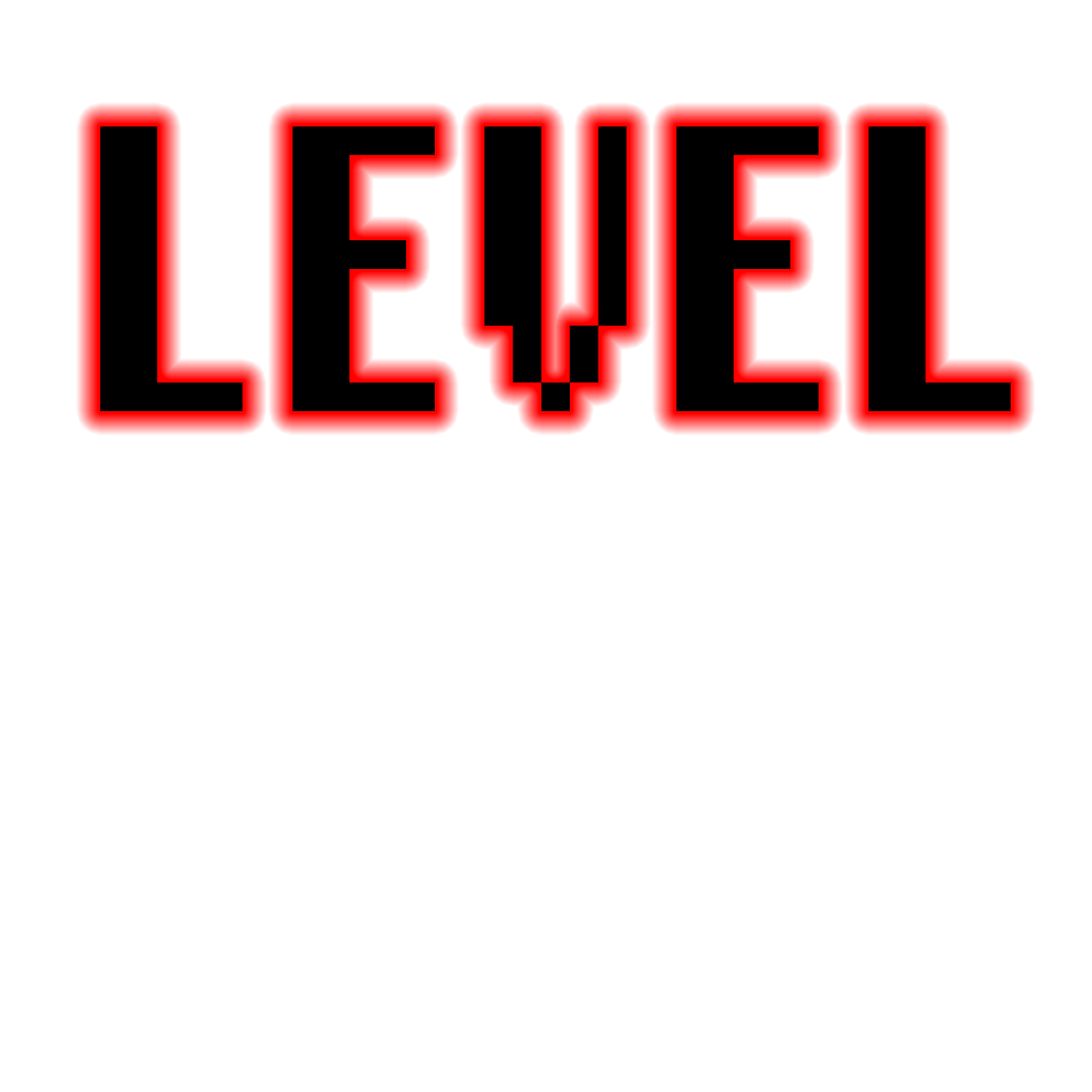
<style>
.page{position:relative;width:1092px;height:1092px;background:#ffffff}
.page>*{position:absolute;margin:0}
.t1{font:426.9px "Light-Arial";letter-spacing:0.05em;color:#000000}
</style>
<div class="page">
<p class="t1" style="left:100px;top:126px;width:912px;height:286px">LEVEL</p>
</div>
